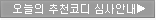
<style>
.page{position:relative;width:157px;height:20px;background:#9b9b9b}
.page>*{position:absolute;margin:0}
.t1{font:12px "morris9";color:#ffffff}
</style>
<div class="page">
<p class="t1" style="left:13px;top:4px;width:132px;height:10px">오늘의 추천코디 심사안내▶</p>
</div>
